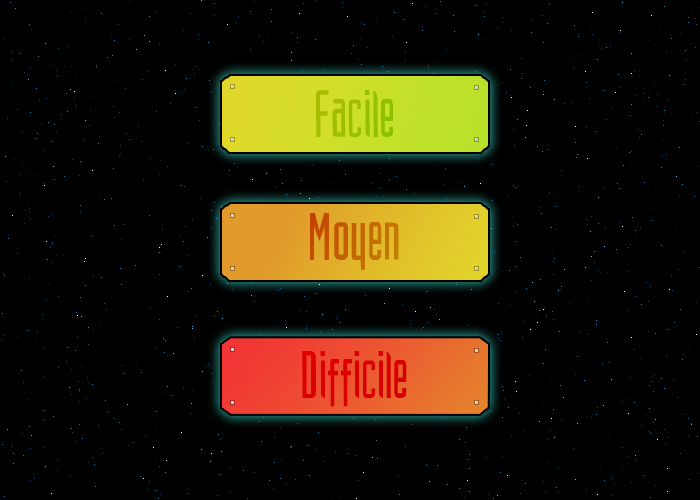
<style>
.page{position:relative;width:700px;height:500px;background:#000000}
.page>*{position:absolute;margin:0}
.t1{font:58.3px "XFiles";color:#9bbf00}
.t2{font:58.3px "XFiles";color:#c36300}
.t3{font:58.3px "XFiles";color:#db0000}
</style>
<div class="page">
<p class="t1" style="left:316px;top:90px;width:78px;height:47px">Facile</p>
<p class="t2" style="left:310px;top:213px;width:89px;height:57px">Moyen</p>
<p class="t3" style="left:302px;top:351px;width:105px;height:56px">Difficile</p>
</div>
